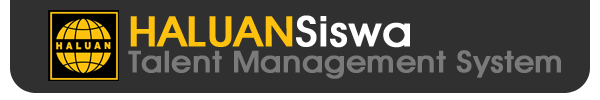
<style>
.page{position:relative;width:600px;height:100px;background:#303030}
.page>*{position:absolute;margin:0}
.t1{font:30px/26px "AvantGardeITCbyBT-Medium";color:#7a7a7a;font-weight:bold;scale:1.09 1}
.t2{font:42px/26px "AvantGardeITCbyBT-Medium";color:#fec20e;font-weight:bold;scale:1.09 1}
.t3{font:42px/26px "AvantGardeITCbyBT-Medium";color:#ffffff;font-weight:bold;scale:1.09 1}
</style>
<div class="page">
<p class="t1" style="left:128px;top:15px;width:433px;height:64px"><span class="t2">HALUAN</span><span class="t3">Siswa<br></span>Talent Management System</p>
</div>
